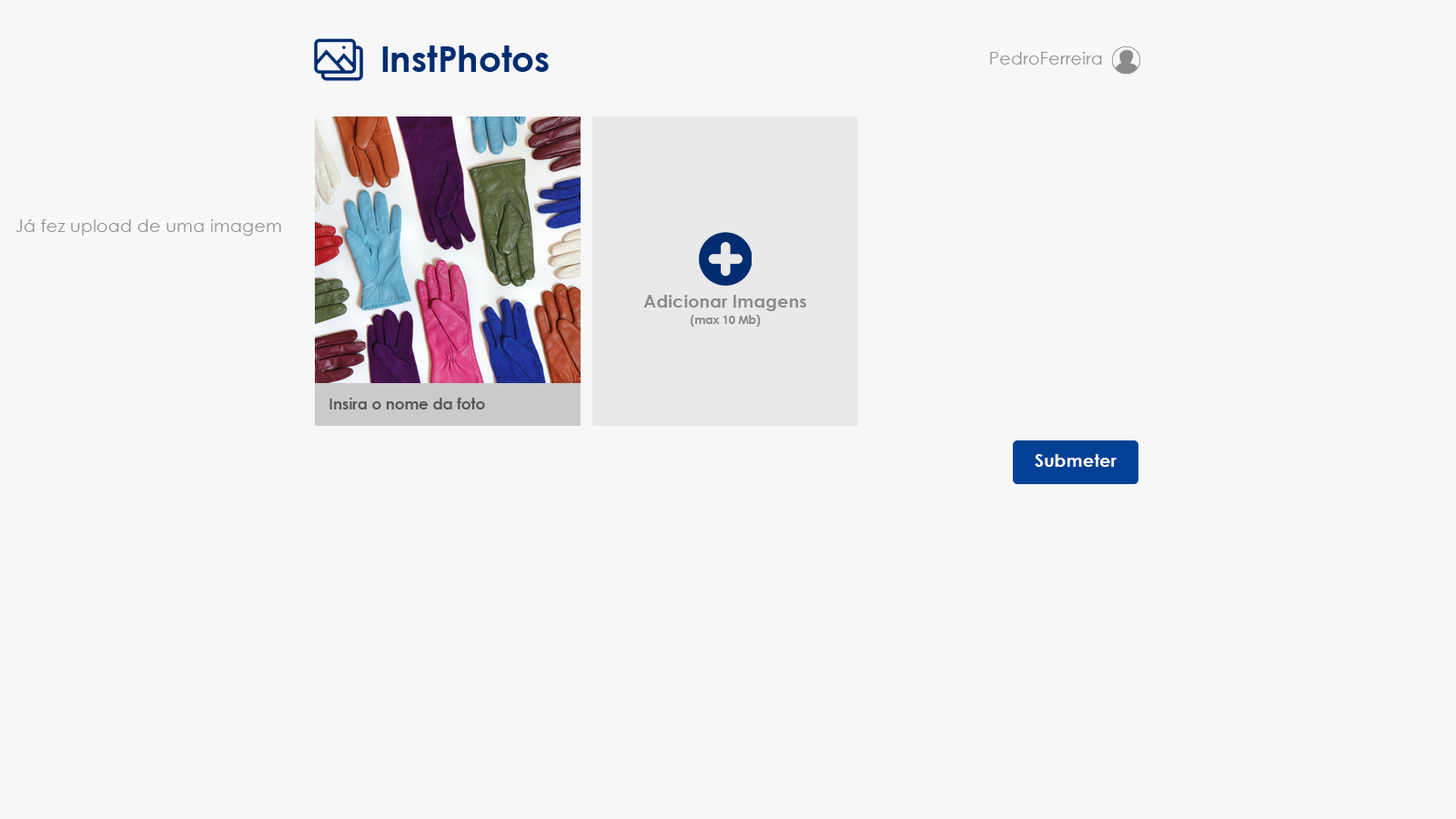
<style>
.page{position:relative;width:1456px;height:819px;background:#f7f7f7}
.page>*{position:absolute;margin:0}
.t1{font:17.7px "CenturyGothic";color:#929292}
.t2{font:17.7px/16.4px "CenturyGothic-Bold";color:#8a8a8a}
.t3{font:11.4px/16.4px "CenturyGothic-Bold";color:#8a8a8a}
.t4{font:15.2px "CenturyGothic-Bold";color:#565656}
.t5{font:17.7px "CenturyGothic-Bold";color:#ffffff}
</style>
<div class="page">
<p class="t1" style="left:990px;top:52px;width:112px;height:13px">PedroFerreira</p>
<p class="t1" style="left:15px;top:219px;width:266px;height:17px">Já fez upload de uma imagem</p>
<p class="t2" style="left:643px;top:295px;width:163px;height:32px;text-align:center">Adicionar Imagens<br><span class="t3">(max 10 Mb)</span></p>
<p class="t4" style="left:329px;top:398px;width:156px;height:11px">Insira o nome da foto</p>
<p class="t5" style="left:1035px;top:454px;width:82px;height:13px">Submeter</p>
</div>
